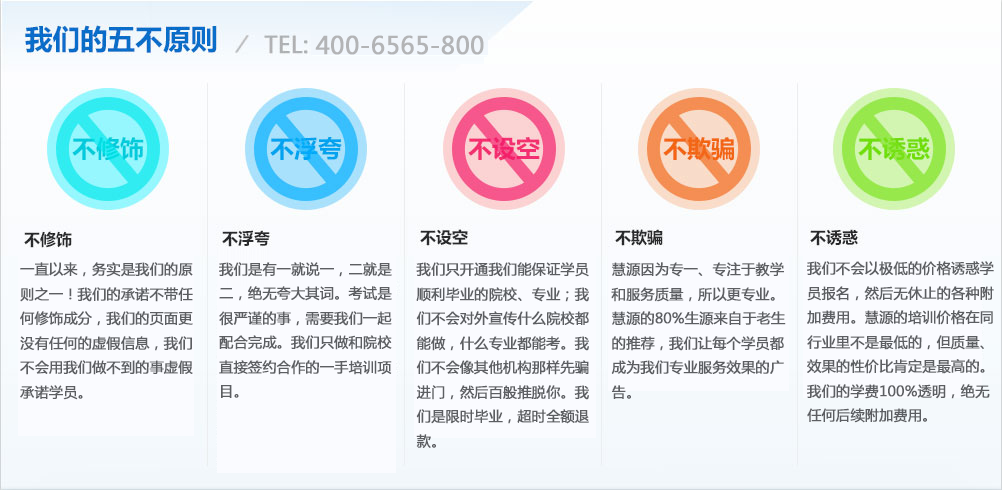
<style>
.page{position:relative;width:1002px;height:490px;background:#fafbff}
.page>*{position:absolute;margin:0}
.t1{font:24px "MicrosoftYaHei";color:#b3b4b6;font-weight:bold}
.t2{font:14px "MicrosoftYaHei";color:#5c5e62;font-weight:bold}
</style>
<div class="page">
<p class="t1" style="left:315px;top:35px;width:169px;height:20px">400-6565-800</p>
<p class="t2" style="left:20px;top:262px;width:173px;height:138px">一直以来，务实是我们的原<br>则之一！我们的承诺不带任<br>何修饰成分，我们的页面更<br>没有任何的虚假信息，我们<br>不会用我们做不到的事虚假<br>承诺学员。</p>
<p class="t2" style="left:219px;top:262px;width:173px;height:136px">我们是有一就说一，二就是<br>二，绝无夸大其词。考试是<br>很严谨的事，需要我们一起<br>配合完成。我们只做和院校<br>直接签约合作的一手培训项<br>目。</p>
<p class="t2" style="left:416px;top:262px;width:173px;height:186px">我们只开通我们能保证学员<br>顺利毕业的院校、专业；我<br>们不会对外宣传什么院校都<br>能做，什么专业都能考。我<br>们不会像其他机构那样先骗<br>进门，然后百般推脱你。我<br>们是限时毕业，超时全额退<br>款。</p>
<p class="t2" style="left:611px;top:262px;width:175px;height:137px">慧源因为专一、专注于教学<br>和服务质量，所以更专业。<br>慧源的80%生源来自于老生<br>的推荐，我们让每个学员都<br>成为我们专业服务效果的广<br>告。</p>
<p class="t2" style="left:807px;top:261px;width:187px;height:162px">我们不会以极低的价格诱惑学<br>员报名，然后无休止的各种附<br>加费用。慧源的培训价格在同<br>行业里不是最低的，但质量、<br>效果的性价比肯定是最高的。<br>我们的学费100%透明，绝无<br>任何后续附加费用。</p>
</div>
